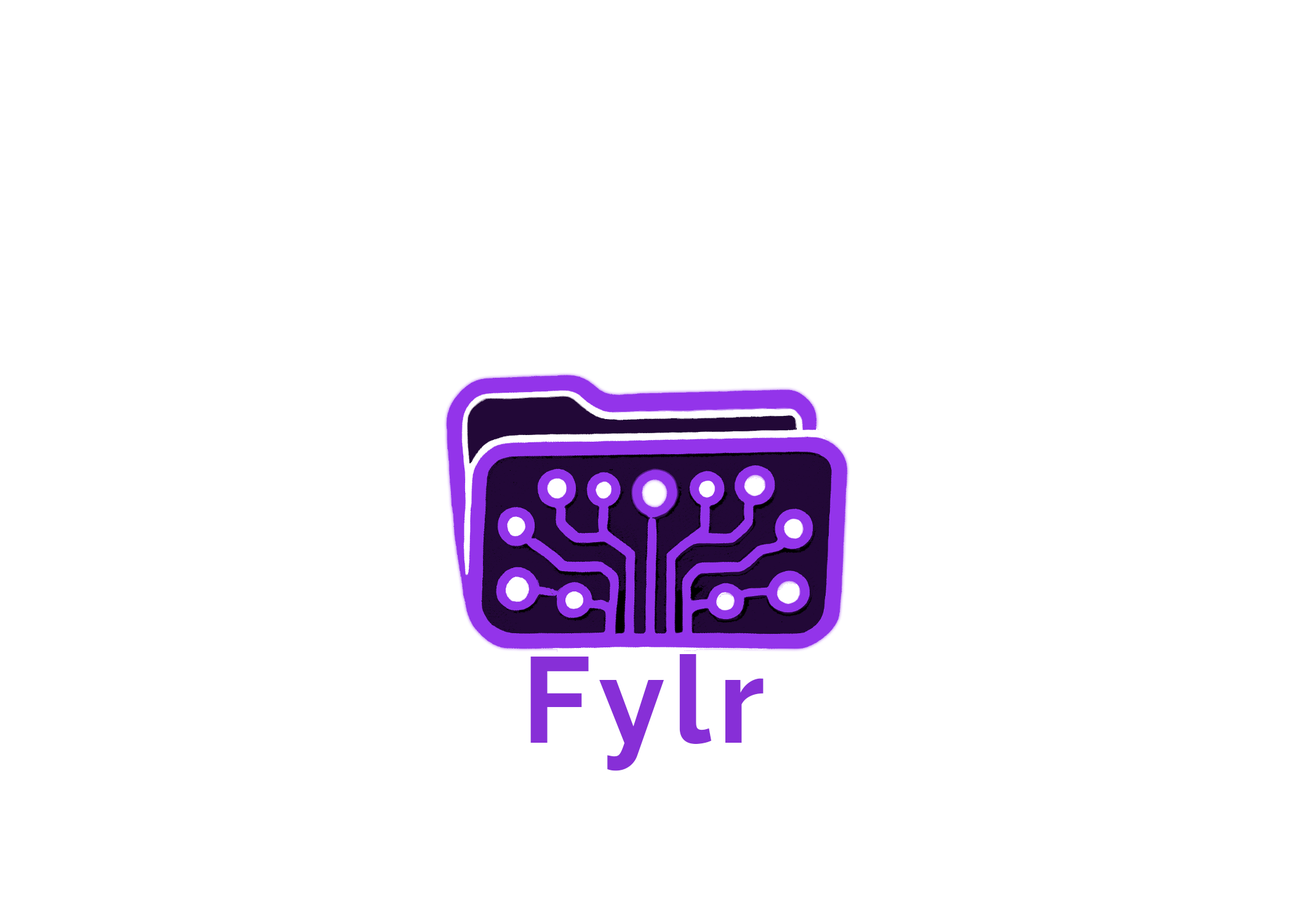
<style>
.page{position:relative;width:1292px;height:923px;background:#ffffff}
.page>*{position:absolute;margin:0}
.t1{font:120.9px "RalewayRoman_702.000wght_0ital";letter-spacing:0.06em;color:#872fd7}
</style>
<div class="page">
<p class="t1" style="left:530px;top:654px;width:234px;height:117px">Fylr</p>
</div>
